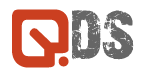
<style>
.page{position:relative;width:145px;height:70px;background:#ffffff}
.page>*{position:absolute;margin:0}
.t1{font:72px "28-Days-Later-Regular";color:#666666}
.t2{font:72px "28-Days-Later-Regular";color:#cb3f20}
.t3{font:72px "Orgy";color:#cb3f20}
</style>
<div class="page">
<p class="t1" style="left:12px;top:9px;width:122px;height:59px"><span class="t2"> </span><span class="t3">q</span>ds</p>
</div>
